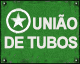
<style>
.page{position:relative;width:80px;height:64px}
.page>*{position:absolute;margin:0}
.t1{font:16px "Arial-BoldMT";letter-spacing:-0.04em;color:#edeae6;font-weight:bold;scale:0.9 1}
.t2{font:16px "Arial-BoldMT";letter-spacing:-0.04em;color:#edeae6;scale:0.95 1}
</style>
<div class="page">
<p class="t1" style="left:33px;top:14px;width:45px;height:16px">UNIÃO</p>
<p class="t2" style="left:4px;top:36px;width:74px;height:13px">DE TUBOS</p>
</div>
